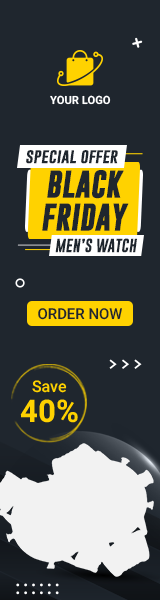
<style>
.page{position:relative;width:160px;height:600px;background:#1f262e}
.page>*{position:absolute;margin:0}
.t1{font:11.4px "Heebo-Bold";color:#ffffff}
.t2{font:15.2px "GoboldBold";color:#1f262e}
.t3{font:27.6px "GoboldBold";color:#1f262e;font-weight:bold}
.t4{font:13.9px "GoboldBold";color:#1f262e}
.t5{font:15px "Heebo-Medium";color:#1f262e}
.t6{font:16.1px "Heebo-Medium";color:#ffd200}
.t7{font:31.3px "Heebo-Bold";color:#ffd200}
</style>
<div class="page">
<p class="t1" style="left:50px;top:95px;width:61px;height:10px">YOUR LOGO</p>
<p class="t2" style="left:26px;top:150px;width:92px;height:14px">special offer</p>
<p class="t3" style="left:42px;top:170px;width:87px;height:61px;text-align:center">BLACK <br>FRIDAY</p>
<p class="t4" style="left:55px;top:238px;width:82px;height:15px">MEN’S WATCH</p>
<p class="t5" style="left:38px;top:308px;width:84px;height:12px">ORDER NOW</p>
<p class="t6" style="left:32px;top:380px;width:35px;height:13px">Save</p>
<p class="t7" style="left:20px;top:399px;width:58px;height:24px">40%</p>
</div>
